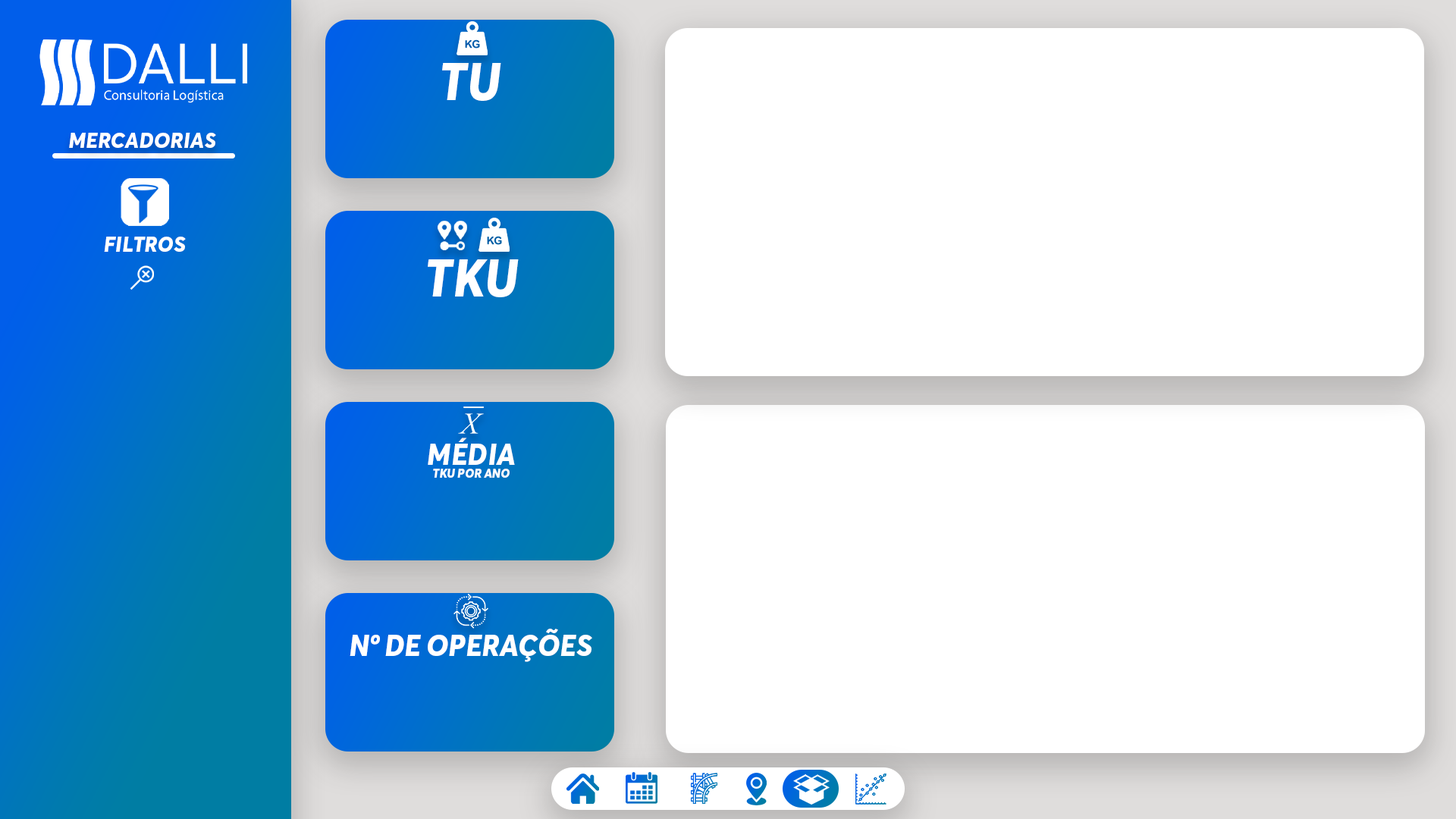
<style>
.page{position:relative;width:1456px;height:819px;background:#ffffff}
.page>*{position:absolute;margin:0}
.t1{font:52.1px "AvertaDemoPE-ExtraboldItalic";color:#ffffff;text-transform:uppercase}
.t2{font:22.1px "AvertaDemoPE-ExtraboldItalic";color:#ffffff;text-transform:uppercase}
.t3{font:12.6px/12.6px "AvertaDemoPE-ExtraboldItalic";color:#ffffff;text-transform:uppercase}
.t4{font:30px/12.6px "AvertaDemoPE-ExtraboldItalic";color:#ffffff;text-transform:uppercase}
.t5{font:30px/12.6px "AvertaDemoPE-ExtraboldItalic";color:#ffffff}
.t6{font:30px "AvertaDemoPE-ExtraboldItalic";color:#ffffff;text-transform:uppercase}
</style>
<div class="page">
<p class="t1" style="left:442px;top:63px;width:59px;height:38px">tu</p>
<p class="t2" style="left:69px;top:133px;width:147px;height:15px">MERCADORIAS</p>
<p class="t2" style="left:104px;top:237px;width:82px;height:15px">filtros</p>
<p class="t1" style="left:428px;top:259px;width:91px;height:38px">tku</p>
<p class="t3" style="left:428px;top:438px;width:87px;height:40px;text-align:center"><span class="t4">méd</span><span class="t5">I</span><span class="t4">a<br></span>TKU por ano</p>
<p class="t6" style="left:350px;top:629px;width:242px;height:33px">nº de operações</p>
</div>
